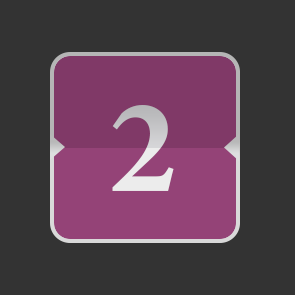
<style>
.page{position:relative;width:295px;height:295px;background:#333333}
.page>*{position:absolute;margin:0}
.t1{font:135.3px "MinionPro-Bold"}
</style>
<div class="page">
<p class="t1" style="left:112px;top:105px;width:62px;height:86px">2</p>
</div>
